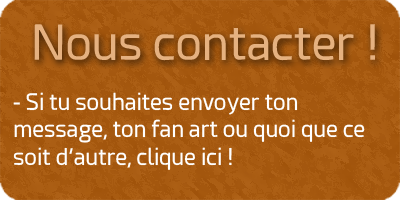
<style>
.page{position:relative;width:400px;height:200px}
.page>*{position:absolute;margin:0}
.t1{font:48px "Esphimere";color:#e5b180}
.t2{font:22.7px "Esphimere";color:#ffffff}
</style>
<div class="page">
<p class="t1" style="left:34px;top:24px;width:341px;height:37px">Nous contacter !</p>
<p class="t2" style="left:13px;top:92px;width:352px;height:78px">- Si tu souhaites envoyer ton message, ton fan art ou quoi que ce soit d’autre, clique ici !</p>
</div>
